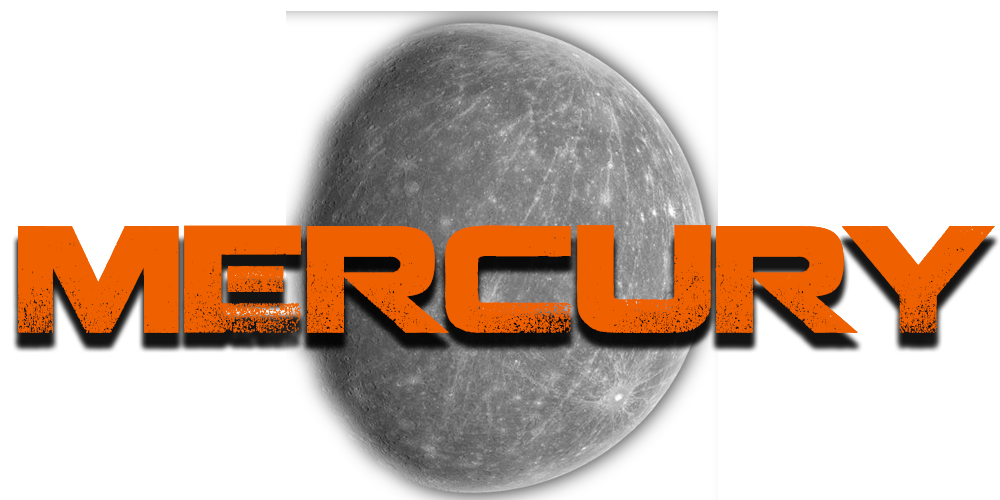
<style>
.page{position:relative;width:1000px;height:500px;background:#ffffff}
.page>*{position:absolute;margin:0}
.t1{font:150px "Coalition";color:#ef6000}
</style>
<div class="page">
<p class="t1" style="left:18px;top:225px;width:977px;height:108px">MERCURY</p>
<p class="t1" style="left:18px;top:225px;width:977px;height:108px">MERCURY</p>
</div>
